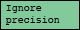
<style>
.page{position:relative;width:80px;height:30px;background:#82ca9c}
.page>*{position:absolute;margin:0}
.t1{font:10px "Courier";color:#000000}
</style>
<div class="page">
<p class="t1" style="left:6px;top:5px;width:54px;height:20px">Ignore <br>precision</p>
</div>
